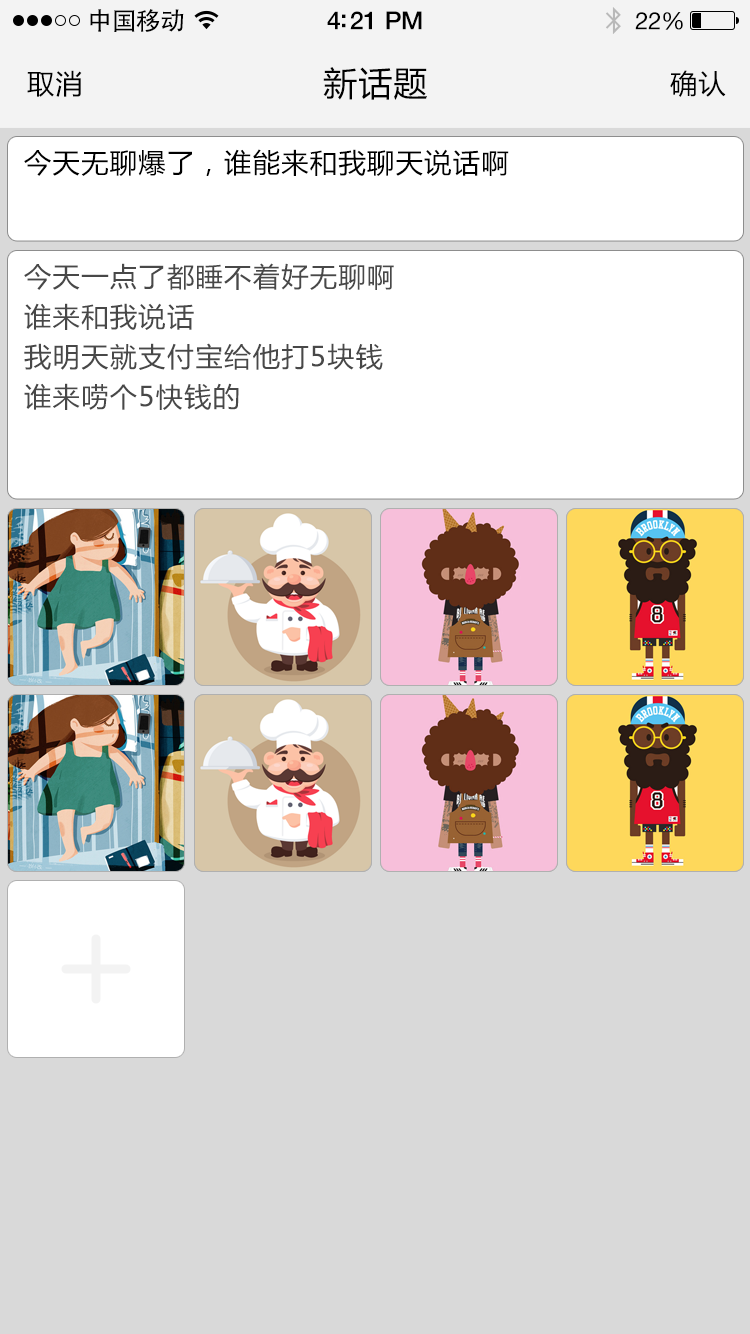
<style>
.page{position:relative;width:750px;height:1334px;background:#d9d9d9}
.page>*{position:absolute;margin:0}
.t1{font:25px "AdobeHeitiStd-Regular";letter-spacing:-0.025em;color:#000000}
.t2{font:25px "HelveticaNeue-Medium";letter-spacing:-0.02em;color:#000000}
.t3{font:24px "HelveticaNeue";letter-spacing:-0.02em;color:#000000}
.t4{font:27px "MicrosoftYaHei";letter-spacing:0.05em;color:#000000}
.t5{font:34px "MicrosoftYaHei";letter-spacing:0.03em;color:#000000}
.t6{font:27px/40px "MicrosoftYaHei";letter-spacing:0.05em;color:#484848}
</style>
<div class="page">
<p class="t1" style="left:90px;top:9px;width:94px;height:23px">中国移动</p>
<p class="t2" style="left:327px;top:11px;width:95px;height:19px">4:21 PM</p>
<p class="t3" style="left:635px;top:12px;width:48px;height:18px">22%</p>
<p class="t4" style="left:27px;top:70px;width:55px;height:27px">取消</p>
<p class="t5" style="left:323px;top:67px;width:104px;height:33px">新话题</p>
<p class="t4" style="left:670px;top:70px;width:56px;height:27px">确认</p>
<p class="t4" style="left:24px;top:149px;width:485px;height:27px">今天无聊爆了，谁能来和我聊天说话啊</p>
<p class="t6" style="left:24px;top:263px;width:370px;height:147px">今天一点了都睡不着好无聊啊<br>谁来和我说话<br>我明天就支付宝给他打5块钱<br>谁来唠个5快钱的</p>
</div>
